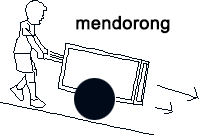
<style>
.page{position:relative;width:213px;height:135px;background:#ffffff}
.page>*{position:absolute;margin:0}
.t1{font:18px "ArialMT";color:#000000;font-weight:bold}
</style>
<div class="page">
<p class="t1" style="left:76px;top:15px;width:94px;height:19px">mendorong</p>
</div>
